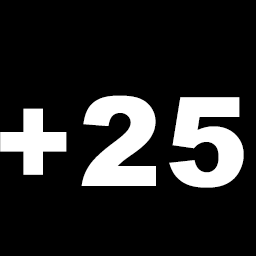
<style>
.page{position:relative;width:256px;height:256px;background:#000000}
.page>*{position:absolute;margin:0}
.t1{font:124px "Arial-Black";letter-spacing:0.034em;color:#ffffff}
</style>
<div class="page">
<p class="t1" style="left:0px;top:95px;width:244px;height:93px">+25</p>
</div>
